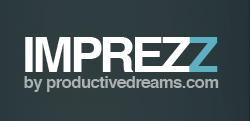
<style>
.page{position:relative;width:250px;height:121px}
.page>*{position:absolute;margin:0}
.t1{font:48.7px "Helvetica-Bold";letter-spacing:-0.075em;color:#ffffff}
.t2{font:48.7px "Helvetica-Bold";letter-spacing:-0.075em;color:#5dafc1}
.t3{font:16.4px "Helvetica-Bold";letter-spacing:-0.038em;color:#abb1b2}
</style>
<div class="page">
<p class="t1" style="left:25px;top:37px;width:193px;height:35px">IMPREZ<span class="t2">Z</span></p>
<p class="t3" style="left:24px;top:76px;width:195px;height:16px">by productivedreams.com</p>
</div>
